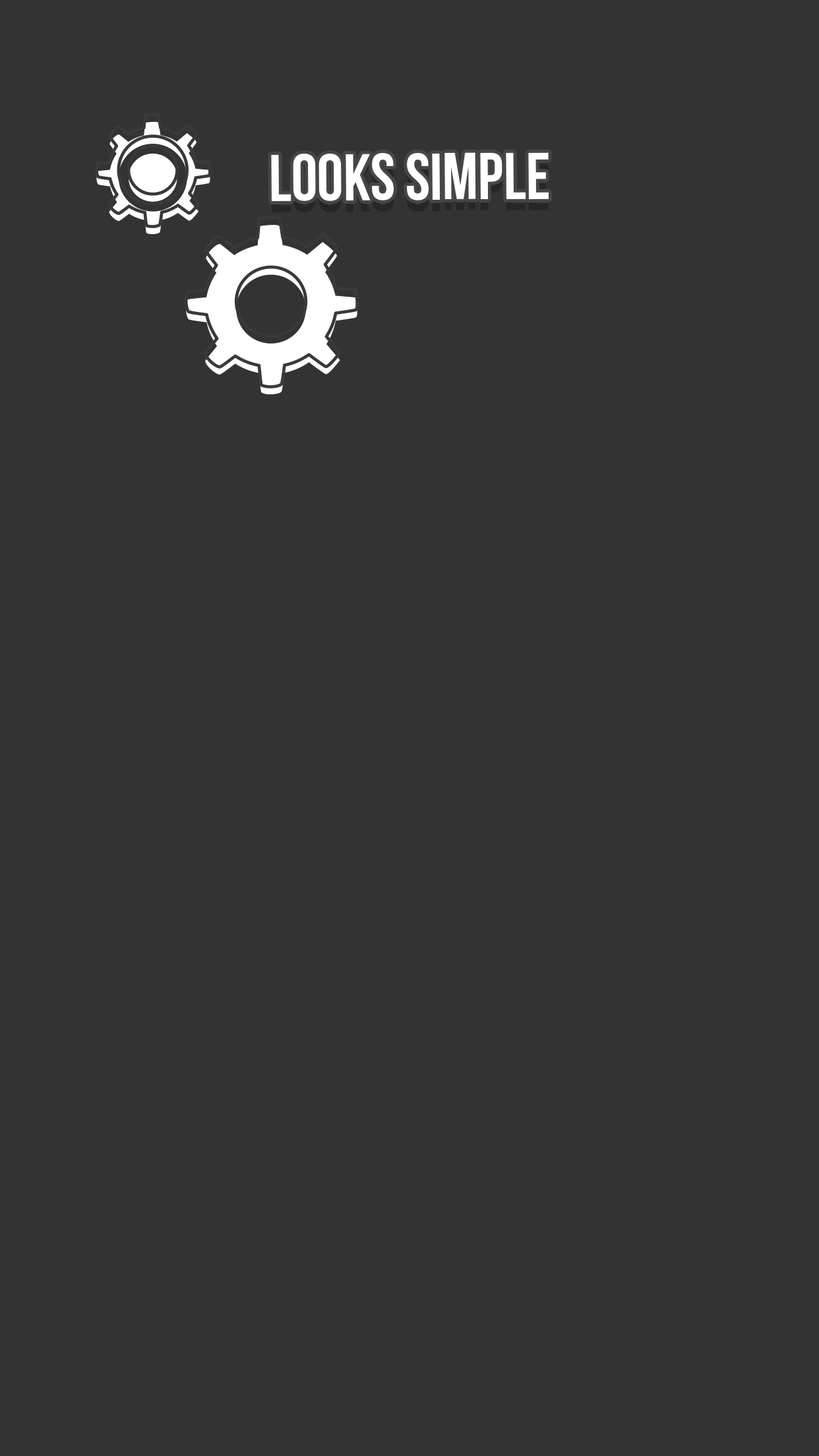
<style>
.page{position:relative;width:819px;height:1456px;background:#333333}
.page>*{position:absolute;margin:0}
.t1{font:65.9px "BebasNeueBold";color:#ffffff;text-transform:uppercase}
</style>
<div class="page">
<p class="t1" style="left:271px;top:152px;width:278px;height:49px">Looks simple</p>
</div>
